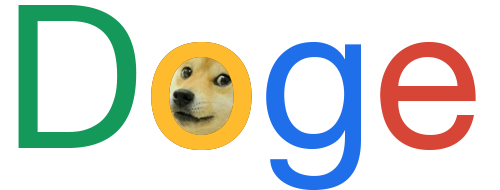
<style>
.page{position:relative;width:500px;height:190px;background:#ffffff}
.page>*{position:absolute;margin:0}
.t1{font:200px "HelveticaNeue";color:#15995a}
.t2{font:200px "HelveticaNeue";color:#febb2d}
.t3{font:200px "HelveticaNeue";color:#1f6fea}
.t4{font:200px "HelveticaNeue";color:#d64536}
</style>
<div class="page">
<p class="t1" style="left:18px;top:5px;width:458px;height:185px">D<span class="t2">o</span><span class="t3">g</span><span class="t4">e</span></p>
</div>
